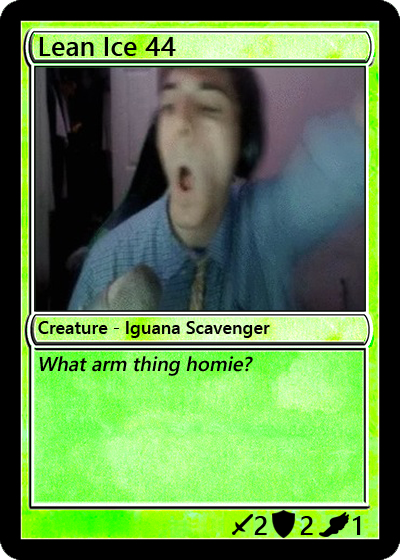
<style>
.page{position:relative;width:400px;height:560px}
.page>*{position:absolute;margin:0}
.t1{font:27px "YuGothicUI-Semibold";color:#000000}
.t2{font:18px "YuGothicUI-Semibold";color:#000000}
.t3{font:20px "YuGothicUI-Semibold";color:#000000;font-style:italic}
</style>
<div class="page">
<p class="t1" style="left:39px;top:37px;width:137px;height:19px">Lean Ice 44</p>
<p class="t2" style="left:38px;top:321px;width:232px;height:17px">Creature - Iguana Scavenger</p>
<p class="t3" style="left:39px;top:356px;width:214px;height:20px">What arm thing homie?</p>
<p class="t1" style="left:254px;top:516px;width:13px;height:19px">2</p>
<p class="t1" style="left:300px;top:516px;width:13px;height:19px">2</p>
<p class="t1" style="left:353px;top:516px;width:8px;height:19px">1</p>
</div>
